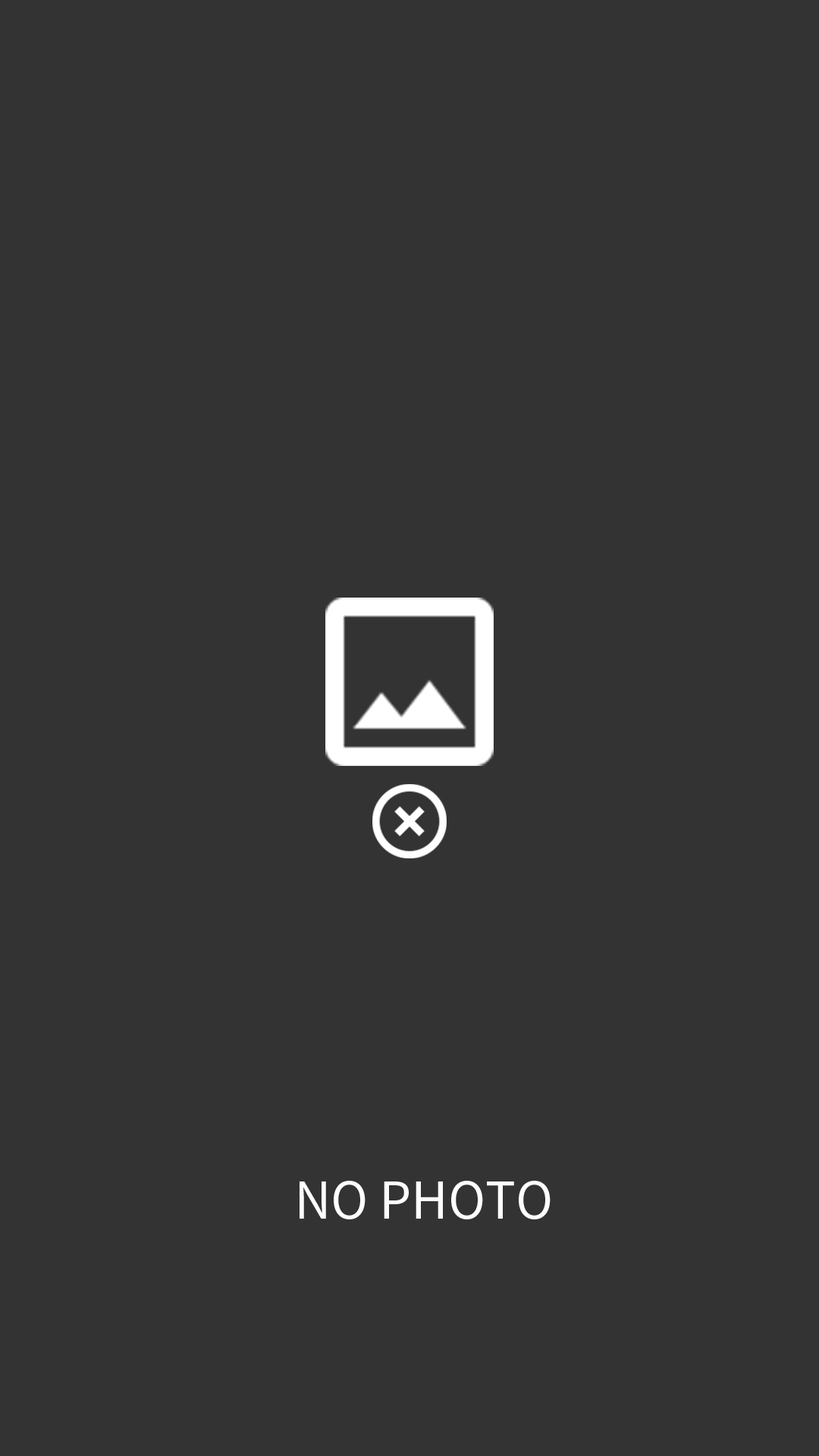
<style>
.page{position:relative;width:819px;height:1456px;background:#333333}
.page>*{position:absolute;margin:0}
.t1{font:50.6px "NotoSansCJKtc-Regular";color:#ffffff}
</style>
<div class="page">
<p class="t1" style="left:300px;top:1181px;width:251px;height:38px">NO PHOTO</p>
</div>
